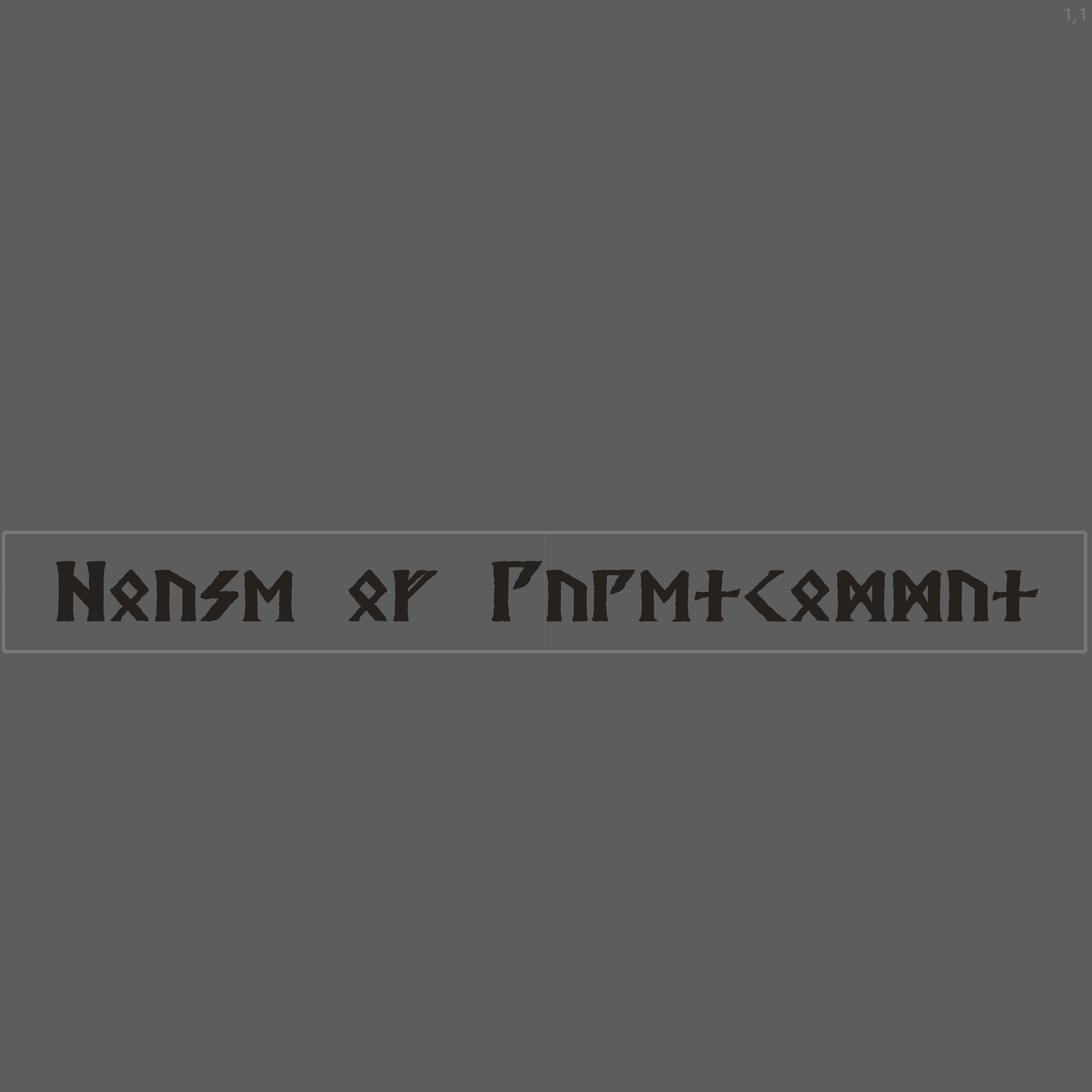
<style>
.page{position:relative;width:1092px;height:1092px;background:#5d5d5d}
.page>*{position:absolute;margin:0}
.t1{font:85.3px "Kehdrai-Bold";color:#27211e}
</style>
<div class="page">
<p class="t1" style="left:55px;top:560px;width:984px;height:62px">House of Tutencommun</p>
</div>
